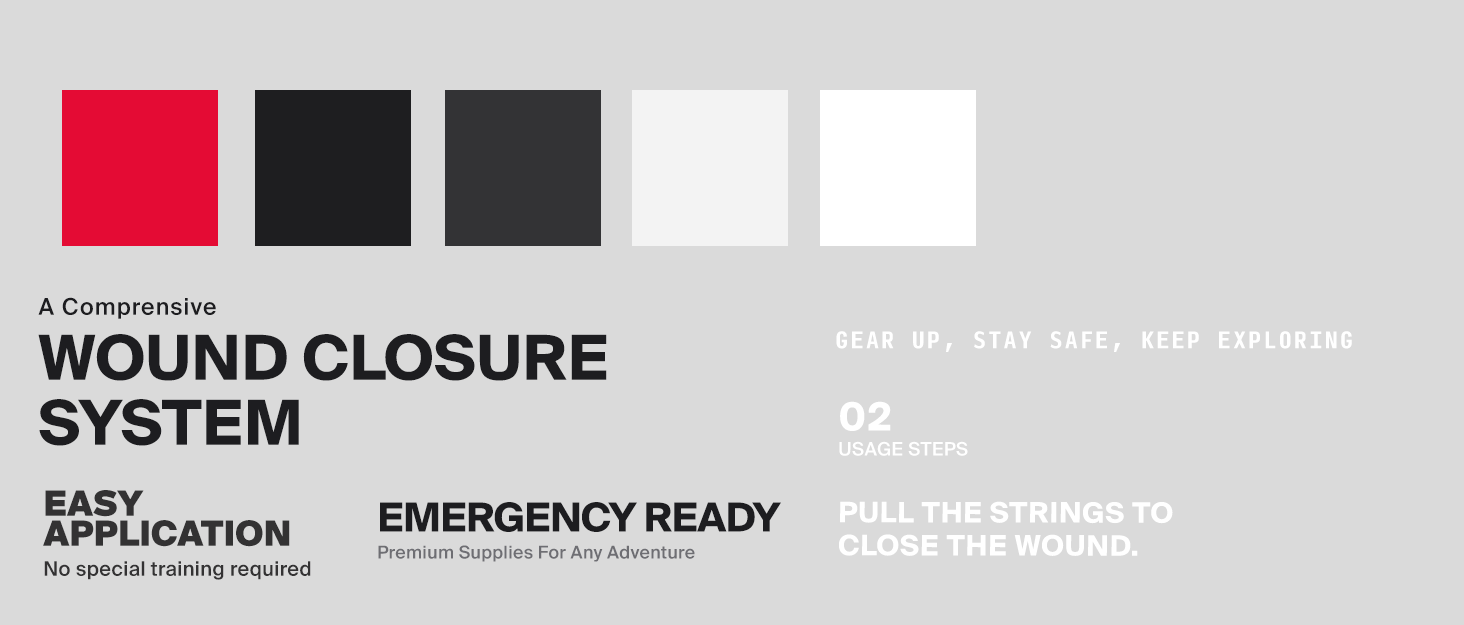
<style>
.page{position:relative;width:1464px;height:625px;background:#dadada}
.page>*{position:absolute;margin:0}
.t1{font:61.9px/64.9px "SuisseIntl-Bold";letter-spacing:0.01em;color:#1d1d20;text-transform:uppercase}
.t2{font:23px/35px "SuisseIntl-Medium";letter-spacing:0.05em;color:#1d1d20}
.t3{font:22.9px "InputMonoCondensed-Bold";letter-spacing:0.1em;color:#ffffff;text-transform:uppercase}
.t4{font:18.4px/25px "SuisseIntl-Medium";letter-spacing:0.03em;color:#ffffff}
.t5{font:39.1px/25px "SuisseIntl-Bold";letter-spacing:0.03em;color:#ffffff;text-transform:uppercase}
.t6{font:20px/30px "SuisseIntl-Medium";letter-spacing:0.02em;color:#333233}
.t7{font:35px/30px "SuisseIntl-Black";color:#333233;text-transform:uppercase}
.t8{font:17.7px/26.9px "SuisseIntl-Medium";letter-spacing:0.02em;color:#6e6e73}
.t9{font:40px/42.3px "SuisseIntl-Bold";letter-spacing:-0.02em;color:#1d1d20;text-transform:uppercase}
.t10{font:28.3px/33px "SuisseIntl-Bold";letter-spacing:0.03em;color:#ffffff;text-transform:uppercase}
</style>
<div class="page">
<p class="t1" style="left:38px;top:297px;width:569px;height:149px"><span class="t2">A Comprensive<br></span>WOUND CLOSURE SYSTEM</p>
<p class="t3" style="left:836px;top:331px;width:516px;height:21px">Gear Up, Stay Safe, Keep Exploring</p>
<p class="t4" style="left:839px;top:401px;width:129px;height:55px"><span class="t5">02<br></span>USAGE STEPS</p>
<p class="t6" style="left:43px;top:490px;width:268px;height:90px"><span class="t7">EASY<br>APPLICATION<br></span>No special training required</p>
<p class="t8" style="left:378px;top:502px;width:403px;height:60px"><span class="t9">EMERGENCY READY<br></span>Premium Supplies For Any Adventure</p>
<p class="t10" style="left:839px;top:501px;width:334px;height:55px">PULL THE STRINGS TO CLOSE THE WOUND.</p>
</div>
